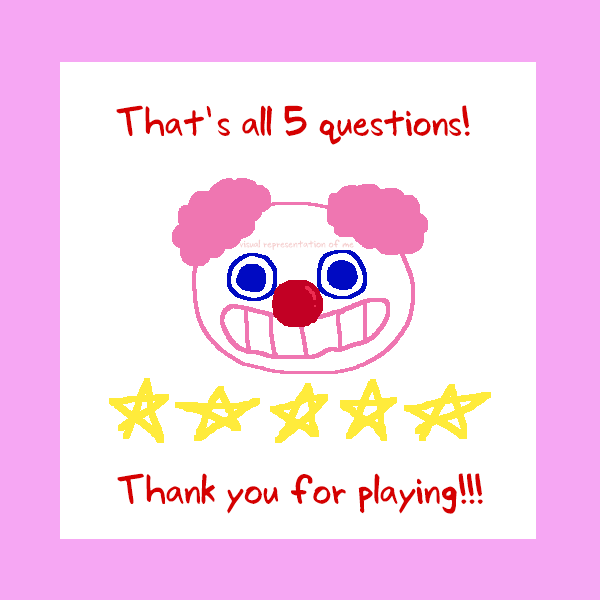
<style>
.page{position:relative;width:600px;height:600px;background:#ffffff}
.page>*{position:absolute;margin:0}
.t1{font:45px "Arenzi";color:#d50000}
.t2{font:12px "Arenzi";color:#f5cfcf}
</style>
<div class="page">
<p class="t1" style="left:116px;top:105px;width:354px;height:40px">That’s all 5 questions!</p>
<p class="t2" style="left:239px;top:239px;width:115px;height:11px">visual representation of me</p>
<p class="t1" style="left:117px;top:473px;width:366px;height:41px">Thank you for playing!!!</p>
</div>
